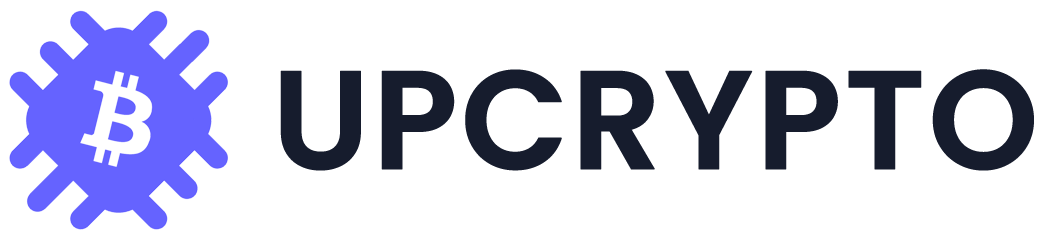
<style>
.page{position:relative;width:1042px;height:240px;background:#ffffff}
.page>*{position:absolute;margin:0}
.t1{font:140px "Poppins-SemiBold";letter-spacing:-0.005em;color:#161c2d;font-weight:bold}
</style>
<div class="page">
<p class="t1" style="left:280px;top:69px;width:754px;height:102px">UPCRYPTO</p>
</div>
